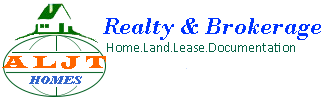
<style>
.page{position:relative;width:322px;height:100px;background:#ffffff}
.page>*{position:absolute;margin:0}
.t1{font:24px "BodoniMT-BoldItalic";color:#0033ff}
.t2{font:14px "Calibri-Light";color:#056144}
.t3{font:18px "LatinWide";color:#ff6600}
.t4{font:12px "BodoniMTBlack-Italic";color:#3366cc}
</style>
<div class="page">
<p class="t1" style="left:103px;top:18px;width:218px;height:22px">Realty &amp; Brokerage</p>
<p class="t2" style="left:107px;top:42px;width:188px;height:10px">Home.Land.Lease.Documentation</p>
<p class="t3" style="left:2px;top:56px;width:104px;height:13px">A L J T</p>
<p class="t4" style="left:29px;top:76px;width:53px;height:8px">HOMES</p>
</div>
